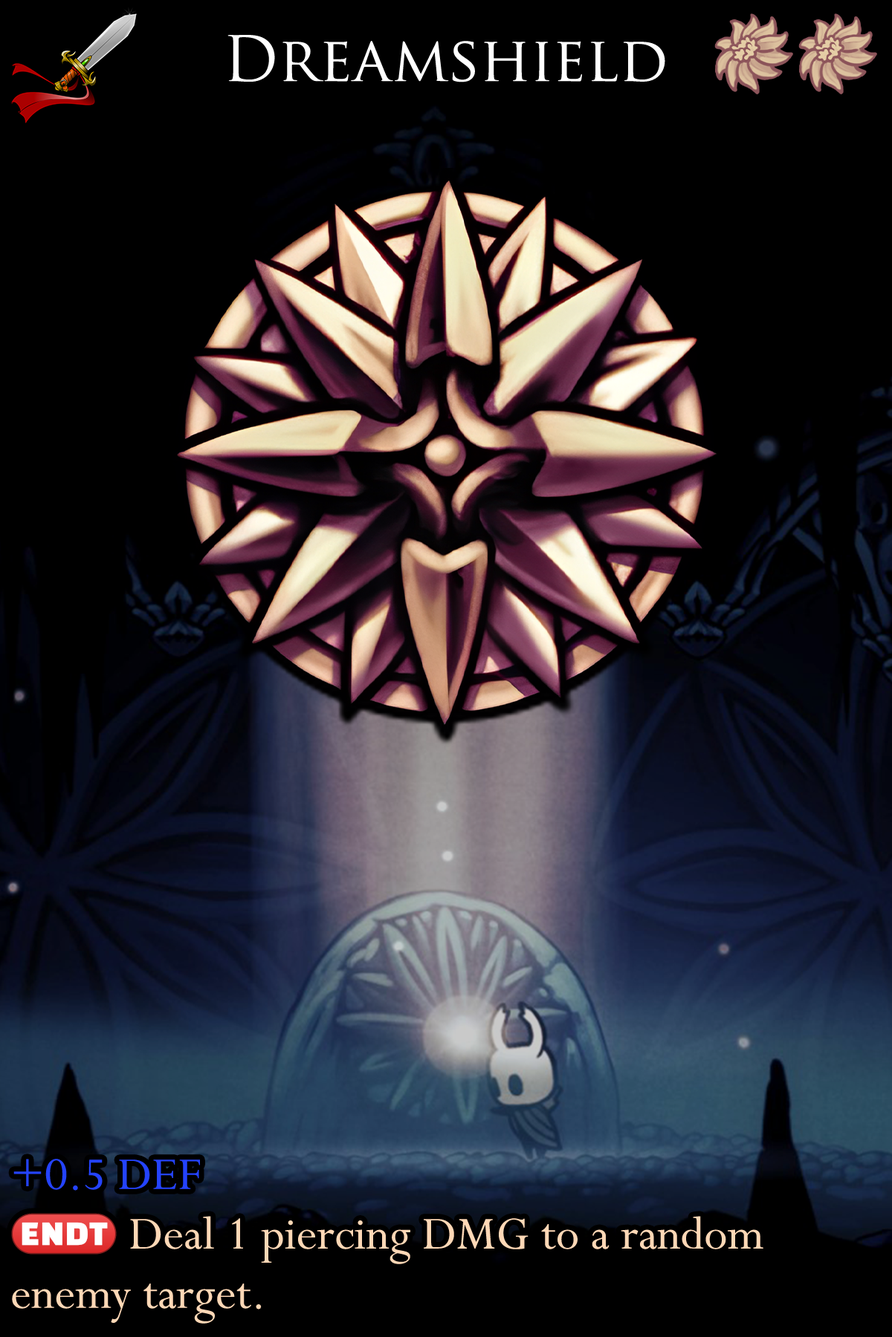
<style>
.page{position:relative;width:892px;height:1337px;background:#000000}
.page>*{position:absolute;margin:0}
.t1{font:104.8px "TrajanPro-Regular";color:#ffffff}
.t2{font:87.7px/59.4px "Perpetua";color:#ffd8b6}
.t3{font:87.7px/59.4px "Perpetua";color:#2443ff}
.t4{font:71.4px/59.4px "stoogedings-Regular";color:#ffd8b6}
</style>
<div class="page">
<p class="t1" style="left:227px;top:35px;width:438px;height:47px">Dreamshield</p>
<p class="t2" style="left:11px;top:1159px;width:752px;height:165px"><span class="t3">+0.5 DEF<br></span><span class="t4">(ENDT)</span> Deal 1 piercing DMG to a random enemy target.</p>
</div>
